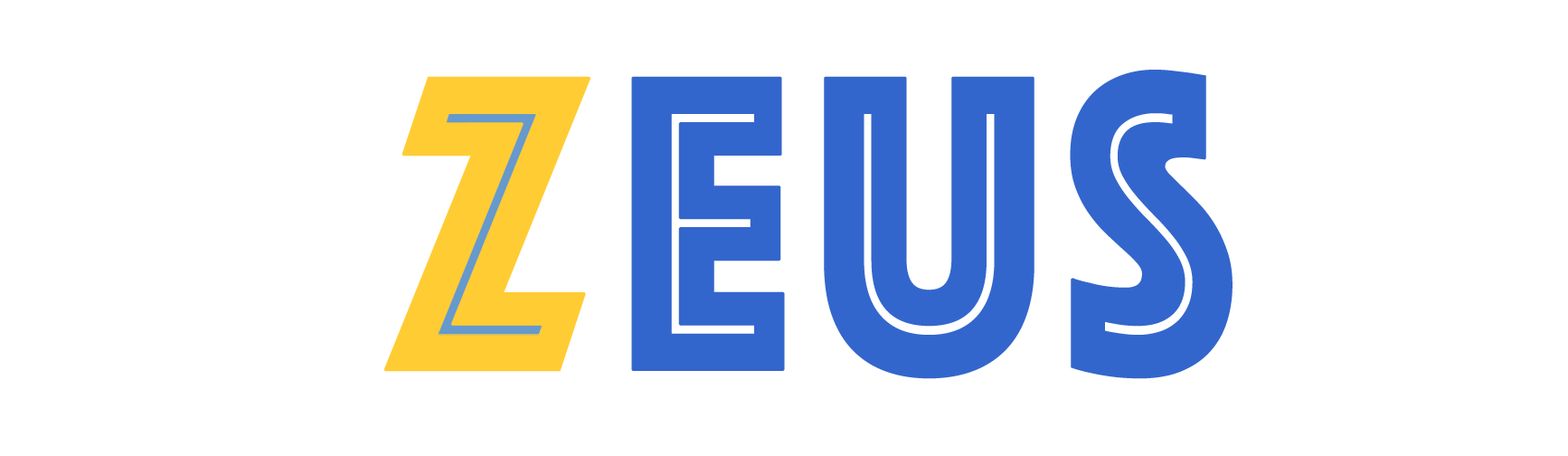
<style>
.page{position:relative;width:1568px;height:456px;background:#ffffff}
.page>*{position:absolute;margin:0}
.t1{font:437.8px "Phosphate-Inline";letter-spacing:0.028em;color:#ffcc33;font-weight:bold;scale:0.86 1}
.t2{font:437.5px "Phosphate-Inline";letter-spacing:0.028em;color:#3366cc;font-weight:bold;scale:0.86 1}
</style>
<div class="page">
<p class="t1" style="left:383px;top:76px;width:207px;height:296px">Z</p>
<p class="t2" style="left:631px;top:70px;width:602px;height:309px">Eus</p>
</div>
